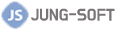
<style>
.page{position:relative;width:118px;height:30px;background:#ffffff}
.page>*{position:absolute;margin:0}
.t1{font:13.9px "BMDoHyeon";color:#797576}
</style>
<div class="page">
<p class="t1" style="left:31px;top:8px;width:84px;height:13px">JUNG-SOFT</p>
</div>
